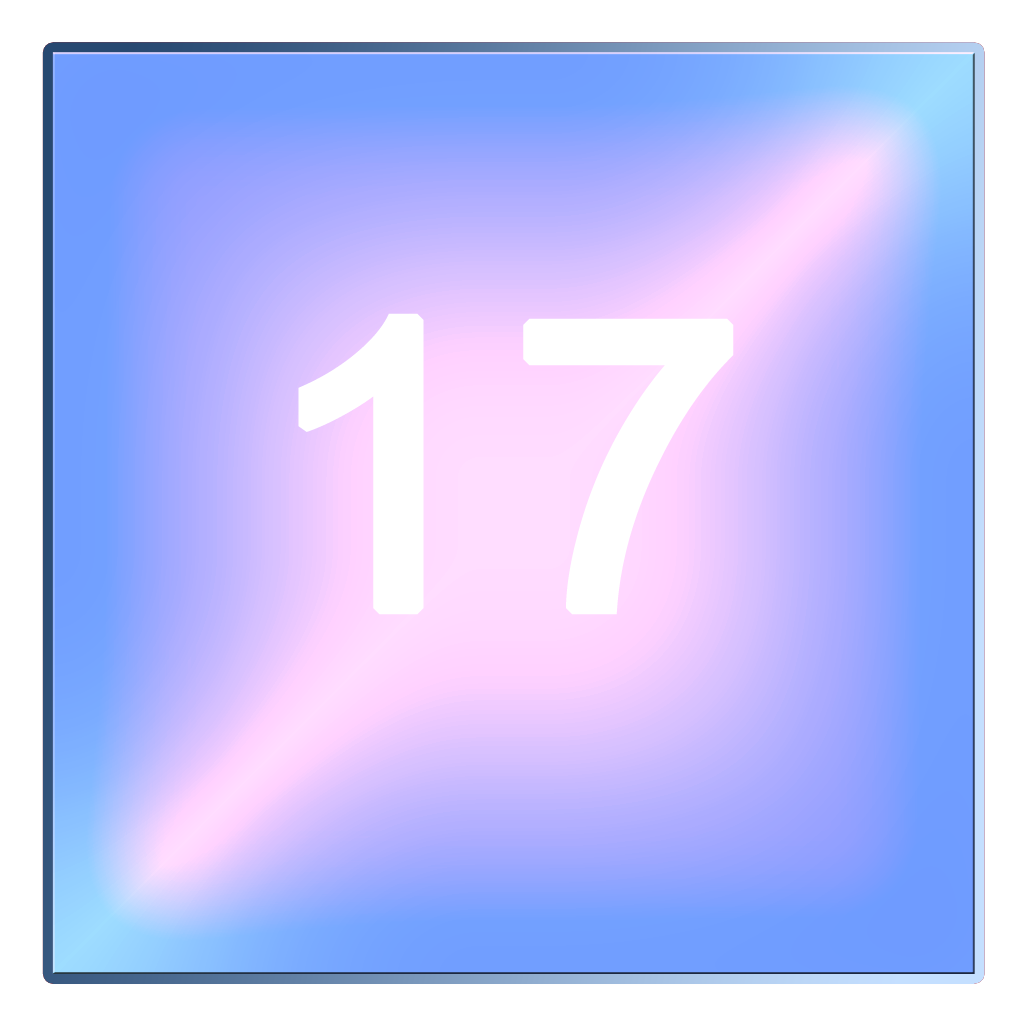
<style>
.page{position:relative;width:1024px;height:1024px}
.page>*{position:absolute;margin:0}
.t1{font:400px "ArialNarrow";color:#ffffff;font-weight:bold;scale:1.3 1}
</style>
<div class="page">
<p class="t1" style="left:298px;top:313px;width:436px;height:302px">17</p>
</div>
